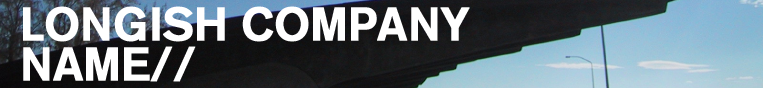
<style>
.page{position:relative;width:763px;height:88px}
.page>*{position:absolute;margin:0}
.t1{font:46px/40px "AkzidenzGrotesk-Bold";color:#ffffff;font-weight:bold}
</style>
<div class="page">
<p class="t1" style="left:20px;top:1px;width:451px;height:89px">LONGISH COMPANY<br>NAME//</p>
</div>
